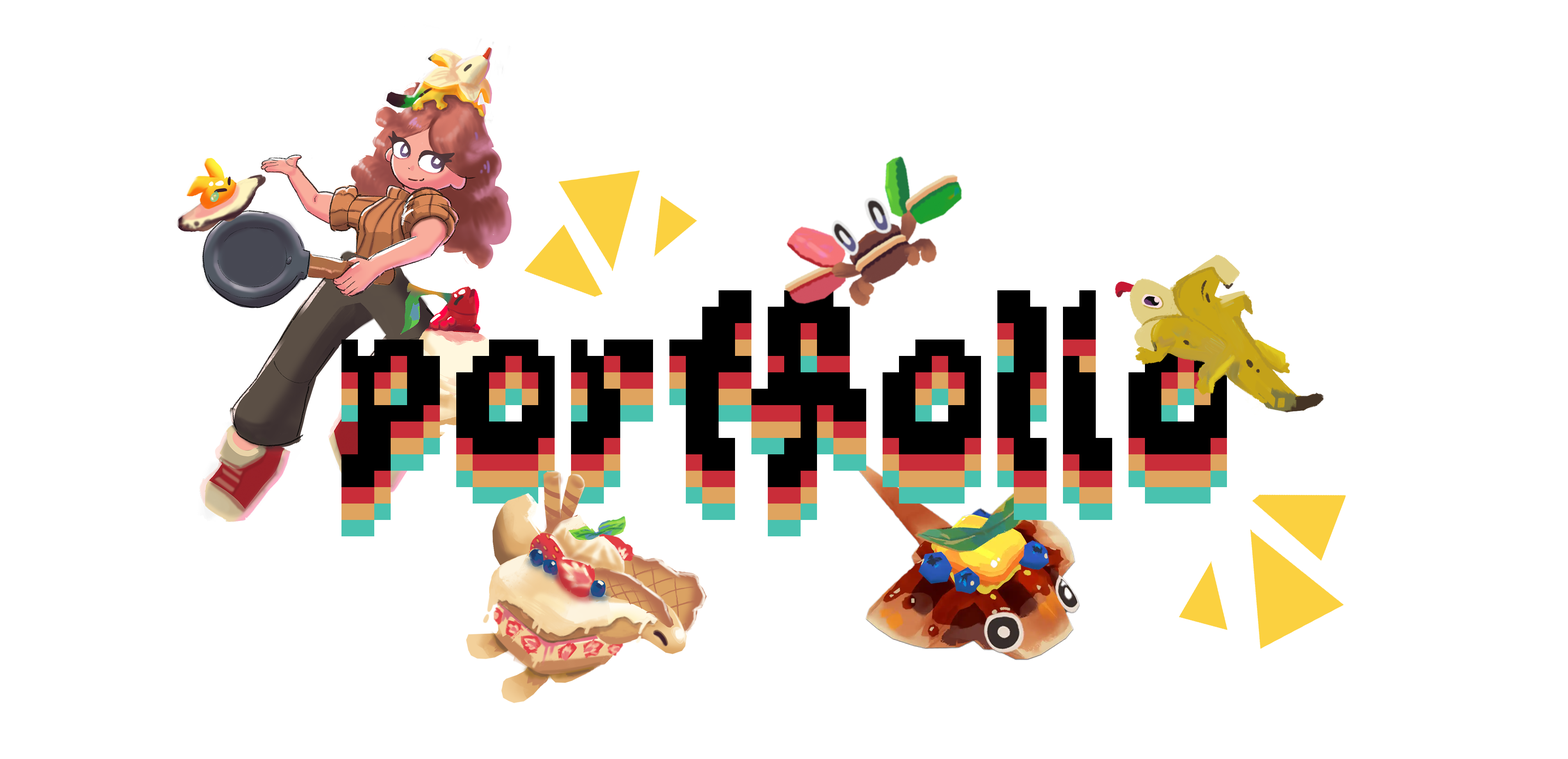
<style>
.page{position:relative;width:1568px;height:759px;background:#ffffff}
.page>*{position:absolute;margin:0}
.t1{font:262.4px "KiwiSoda";color:#000000}
.t2{font:262.4px "KiwiSoda"}
</style>
<div class="page">
<p class="t1" style="left:341px;top:290px;width:886px;height:197px">portfolio</p>
<p class="t2" style="left:341px;top:307px;width:886px;height:196px">portfolio</p>
<p class="t2" style="left:341px;top:323px;width:886px;height:197px">portfolio</p>
</div>
